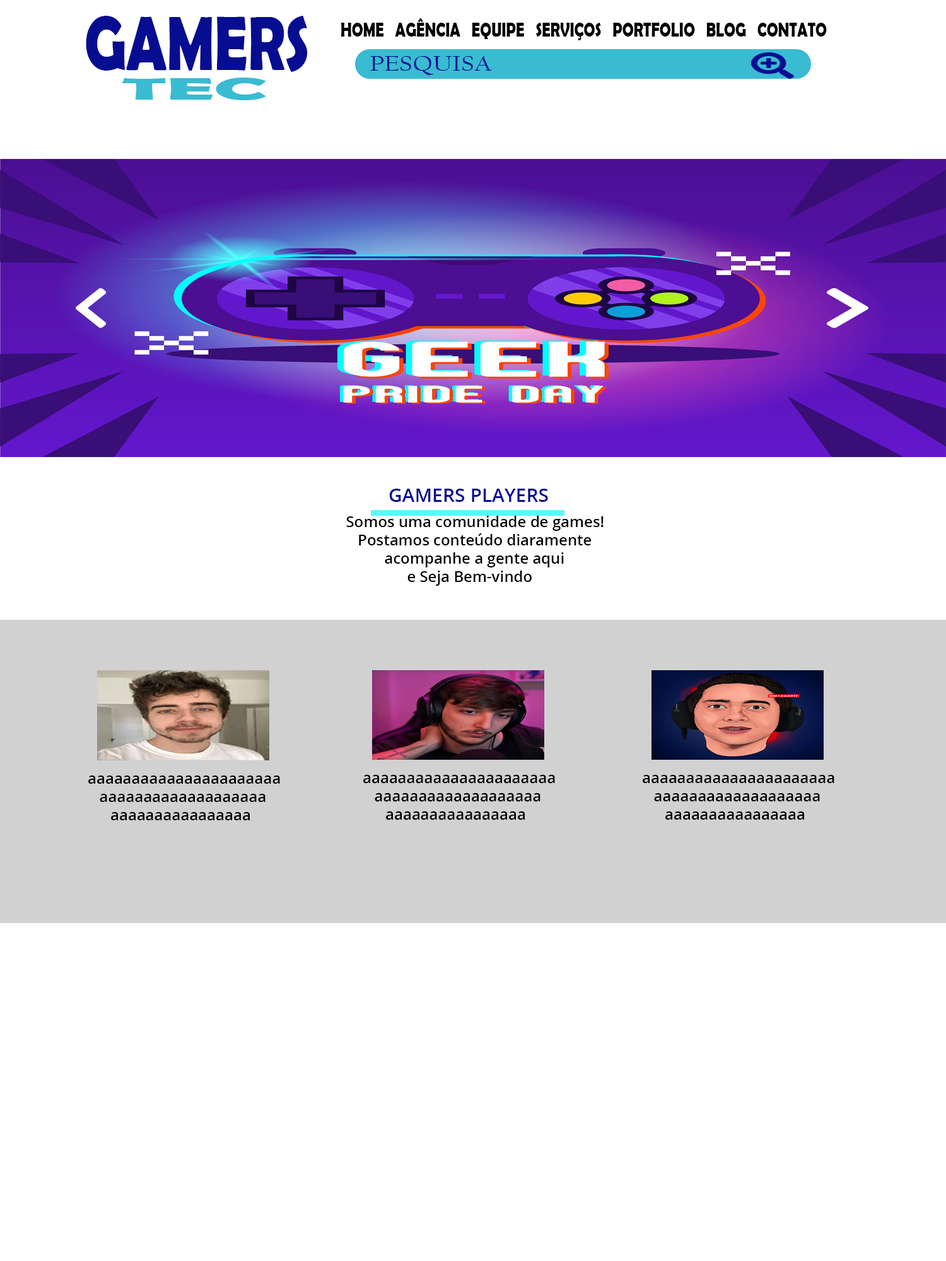
<style>
.page{position:relative;width:946px;height:1261px;background:#ffffff}
.page>*{position:absolute;margin:0}
.t1{font:77.7px "BerlinSansFBDemi-Bold";color:#070d90;scale:0.75 1}
.t2{font:19.9px "BerlinSansFBDemi-Bold";color:#010101;scale:0.75 1}
.t3{font:21.5px "CalifornianFB-Reg";color:#070d90;scale:1.24 1}
.t4{font:31.4px "BerlinSansFBDemi-Bold";color:#39bbd2;scale:2.69 1}
.t5{font:18.9px "OpenSans-Semibold";color:#070d90}
.t6{font:15.1px "OpenSans-Semibold";color:#000000}
</style>
<div class="page">
<p class="t1" style="left:86px;top:16px;width:222px;height:56px">GAMERS</p>
<p class="t2" style="left:341px;top:18px;width:486px;height:22px">HOME   AGÊNCIA   EQUIPE   SERVIÇOS   PORTFOLIO   BLOG   CONTATO</p>
<p class="t3" style="left:370px;top:56px;width:122px;height:19px">PESQUISA</p>
<p class="t4" style="left:122px;top:78px;width:144px;height:22px">TEC</p>
<p class="t5" style="left:389px;top:489px;width:159px;height:13px">GAMERS PLAYERS</p>
<p class="t6" style="left:346px;top:516px;width:257px;height:70px">Somos uma comunidade de games!<br>   Postamos conteúdo diaramente<br>       acompanhe a gente aqui <br>      e Seja Bem-vindo</p>
<p class="t6" style="left:88px;top:775px;width:192px;height:45px">aaaaaaaaaaaaaaaaaaaaaa<br>   aaaaaaaaaaaaaaaaaaa<br> aaaaaaaaaaaaaaaa</p>
<p class="t6" style="left:363px;top:774px;width:192px;height:46px">aaaaaaaaaaaaaaaaaaaaaa<br>   aaaaaaaaaaaaaaaaaaa<br> aaaaaaaaaaaaaaaa</p>
<p class="t6" style="left:642px;top:775px;width:192px;height:45px">aaaaaaaaaaaaaaaaaaaaaa<br>   aaaaaaaaaaaaaaaaaaa<br> aaaaaaaaaaaaaaaa</p>
</div>
